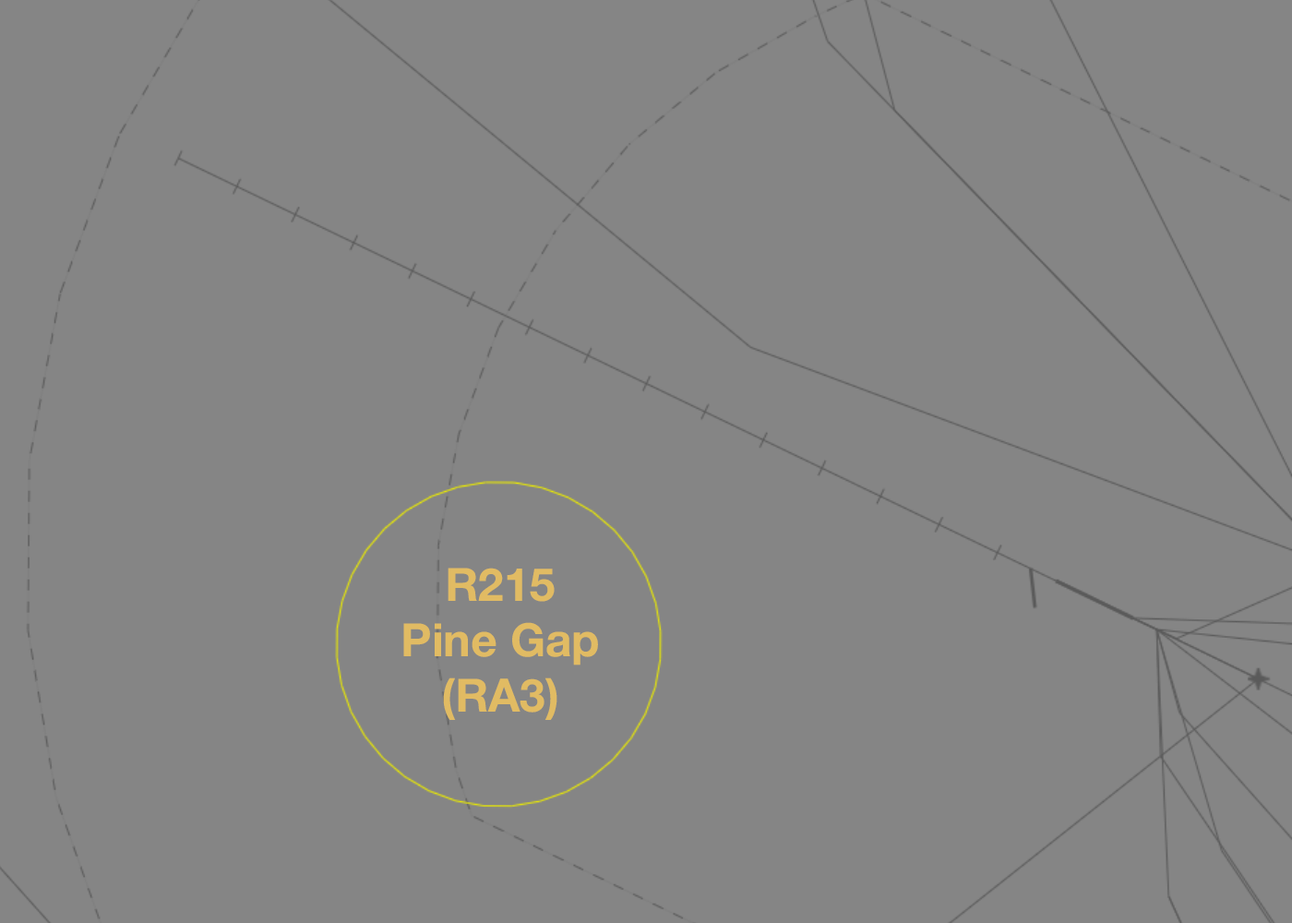
<style>
.page{position:relative;width:1292px;height:923px;background:#858585}
.page>*{position:absolute;margin:0}
.t1{font:46.1px "HelveticaNeue-Bold";color:#e1bb63}
</style>
<div class="page">
<p class="t1" style="left:403px;top:568px;width:195px;height:152px;text-align:center">R215<br>Pine Gap<br>(RA3)</p>
</div>
